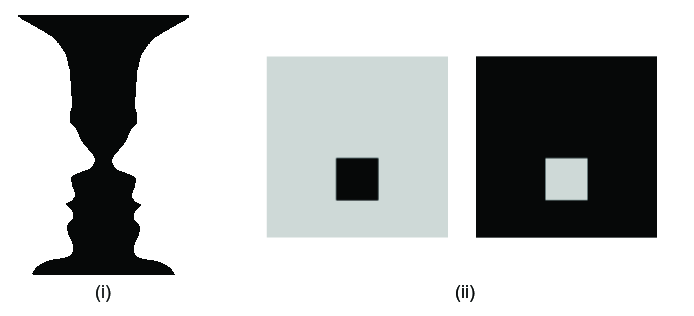
<style>
.page{position:relative;width:694px;height:316px;background:#ffffff}
.page>*{position:absolute;margin:0}
.t1{font:18px "ArialMT";color:#060808}
</style>
<div class="page">
<p class="t1" style="left:96px;top:285px;width:15px;height:17px">(i)</p>
<p class="t1" style="left:456px;top:285px;width:19px;height:17px">(ii)</p>
</div>
